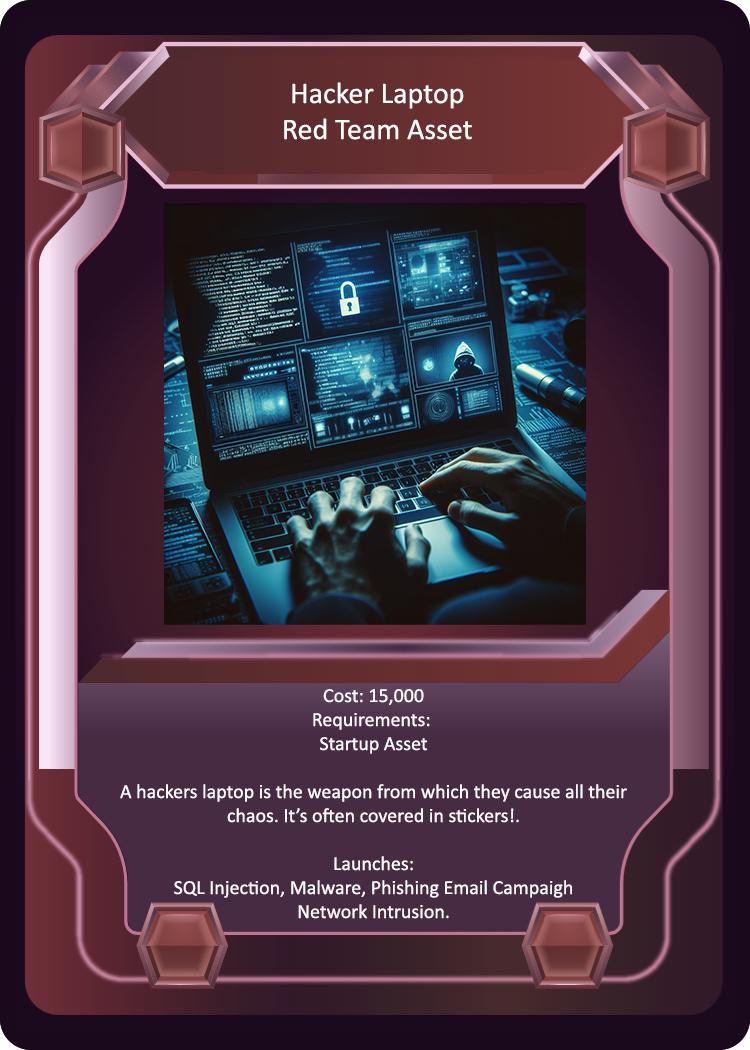
<style>
.page{position:relative;width:750px;height:1050px}
.page>*{position:absolute;margin:0}
.t1{font:30px "Calibri";color:#fcfbfb}
.t2{font:20px "Calibri";color:#fcfbfb}
</style>
<div class="page">
<p class="t1" style="left:284px;top:82px;width:188px;height:58px;text-align:center">Hacker Laptop<br>Red Team Asset</p>
<p class="t2" style="left:120px;top:689px;width:507px;height:230px;text-align:center">Cost: 15,000<br>Requirements: <br>Startup Asset<br><br>A hackers laptop is the weapon from which they cause all their<br>chaos. It’s often covered in stickers!.<br><br>Launches:<br>SQL Injection, Malware, Phishing Email Campaigh<br>Network Intrusion.</p>
</div>
